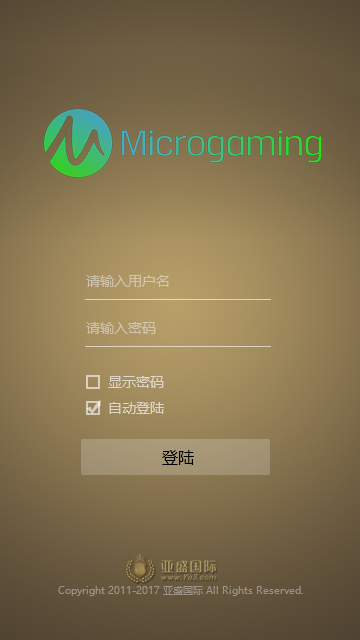
<style>
.page{position:relative;width:360px;height:640px}
.page>*{position:absolute;margin:0}
.t1{font:14px "MicrosoftYaHei";color:#d1c4ac}
.t2{font:14px "MicrosoftYaHei";color:#cfc3ac}
.t3{font:14px "MicrosoftYaHei";color:#ded7c9}
.t4{font:14px "MicrosoftYaHei";color:#dcd5c8}
.t5{font:16px "MicrosoftYaHei";color:#000000}
.t6{font:10px "MicrosoftYaHei";color:#9d9489}
</style>
<div class="page">
<p class="t1" style="left:86px;top:275px;width:83px;height:12px">请输入用户名</p>
<p class="t2" style="left:86px;top:322px;width:70px;height:12px">请输入密码</p>
<p class="t3" style="left:108px;top:376px;width:56px;height:12px">显示密码</p>
<p class="t4" style="left:109px;top:402px;width:55px;height:12px">自动登陆</p>
<p class="t5" style="left:162px;top:450px;width:32px;height:15px">登陆</p>
<p class="t6" style="left:58px;top:586px;width:245px;height:10px">Copyright 2011-2017 亚盛国际 All Rights Reserved.</p>
</div>
